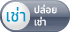
<style>
.page{position:relative;width:70px;height:32px}
.page>*{position:absolute;margin:0}
.t1{font:10px "NotoSansThai-Regular";color:#ffffff}
.t2{font:17px "NotoSansThai-Regular";color:#0099cc}
</style>
<div class="page">
<p class="t1" style="left:34px;top:4px;width:23px;height:22px">ปล่อย<br>เช่า</p>
<p class="t2" style="left:6px;top:7px;width:20px;height:15px">เช่า</p>
</div>
